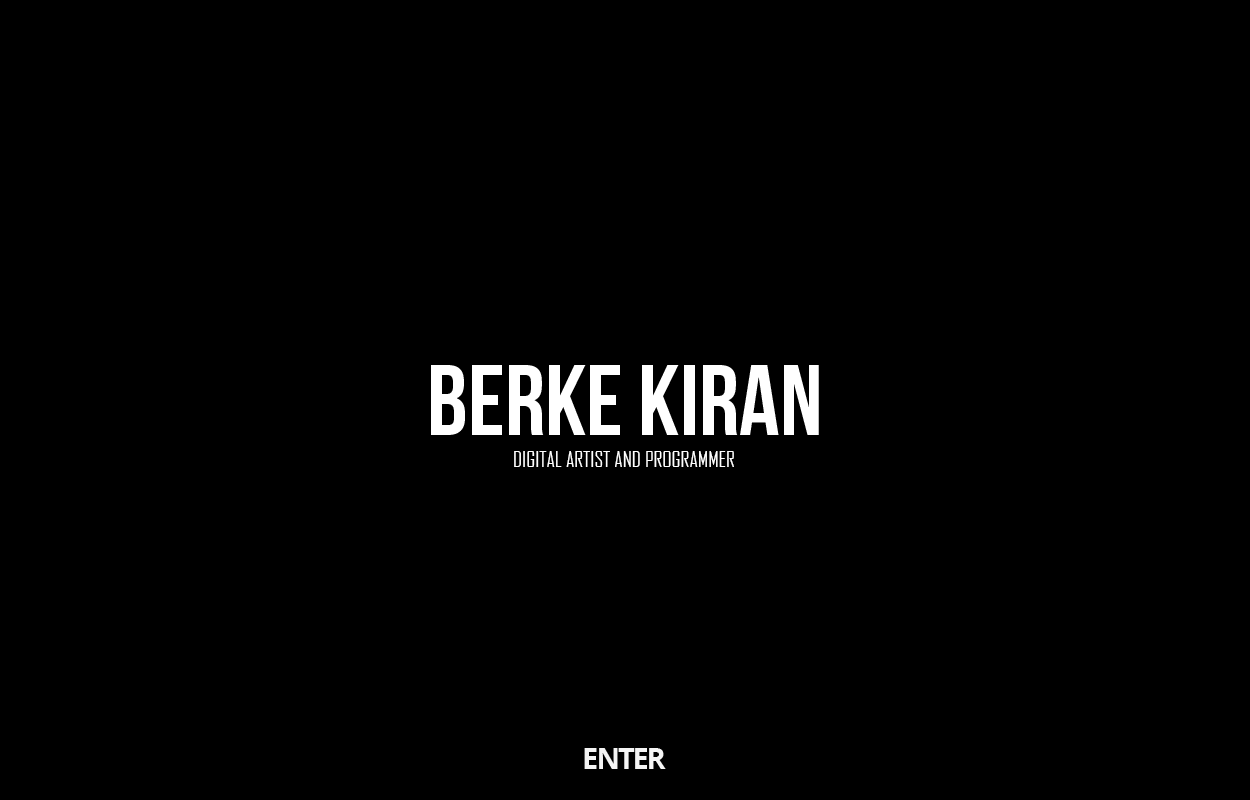
<style>
.page{position:relative;width:1250px;height:800px;background:#000000}
.page>*{position:absolute;margin:0}
.t1{font:100px "BebasNeue";color:#ffffff}
.t2{font:20.8px "AgencyFB-Reg";color:#ffffff}
.t3{font:50px "OpenSans-Bold";letter-spacing:-0.075em;color:#f5f5f5;text-transform:uppercase}
</style>
<div class="page">
<p class="t1" style="left:431px;top:365px;width:388px;height:70px">BERKE KIRAN</p>
<p class="t2" style="left:514px;top:451px;width:220px;height:16px">DIGITAL ARTIST AND PROGRAMMER</p>
<p class="t3" style="left:584px;top:748px;width:82px;height:21px">enter</p>
</div>
